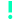
<style>
.page{position:relative;width:20px;height:20px;background:#ffffff}
.page>*{position:absolute;margin:0}
.t1{font:25px "Monofonto-Regular";color:#00ffb7}
</style>
<div class="page">
<p class="t1" style="left:8px;top:1px;width:5px;height:18px">!</p>
</div>
